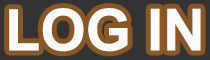
<style>
.page{position:relative;width:210px;height:60px;background:#875826}
.page>*{position:absolute;margin:0}
.t1{font:58px "Arial-BoldMT";color:#ffffff}
</style>
<div class="page">
<p class="t1" style="left:9px;top:8px;width:192px;height:44px">LOG IN</p>
</div>
